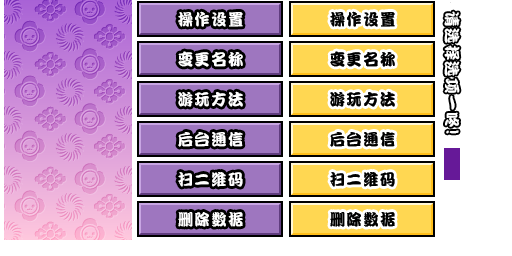
<style>
.page{position:relative;width:512px;height:256px;background:#ffffff}
.page>*{position:absolute;margin:0}
.t1{font:16px "DFPKanTingLiuW9";letter-spacing:0.1em;color:#ffffff;scale:0.96 1}
.t2{font:16px "DFPKanTingLiuW9";letter-spacing:0.1em;color:#000000;scale:0.96 1}
.t3{font:18px "DFPKanTingLiuW9";letter-spacing:0.1em;color:#ffffff;scale:0.96 1}
</style>
<div class="page">
<p class="t1" style="left:178px;top:11px;width:65px;height:16px">操作设置</p>
<p class="t2" style="left:330px;top:11px;width:65px;height:16px">操作设置</p>
<p class="t1" style="left:444px;top:11px;width:16px;height:123px;rotate:90deg">请选择选项一咚<span class="t3">!</span></p>
<p class="t1" style="left:178px;top:51px;width:65px;height:16px">变更名称</p>
<p class="t2" style="left:330px;top:51px;width:65px;height:16px">变更名称</p>
<p class="t1" style="left:178px;top:91px;width:65px;height:16px">游玩方法</p>
<p class="t2" style="left:330px;top:91px;width:65px;height:16px">游玩方法</p>
<p class="t1" style="left:178px;top:132px;width:65px;height:15px">后台通信</p>
<p class="t2" style="left:330px;top:132px;width:65px;height:15px">后台通信</p>
<p class="t1" style="left:178px;top:172px;width:65px;height:15px">扫二维码</p>
<p class="t2" style="left:330px;top:172px;width:65px;height:15px">扫二维码</p>
<p class="t1" style="left:178px;top:212px;width:65px;height:15px">删除数据</p>
<p class="t2" style="left:330px;top:212px;width:65px;height:15px">删除数据</p>
</div>
